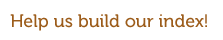
<style>
.page{position:relative;width:223px;height:40px;background:#ffffff}
.page>*{position:absolute;margin:0}
.t1{font:18px "Museo-500";color:#9c5c1a}
</style>
<div class="page">
<p class="t1" style="left:10px;top:14px;width:197px;height:17px">Help us build our index!</p>
</div>
